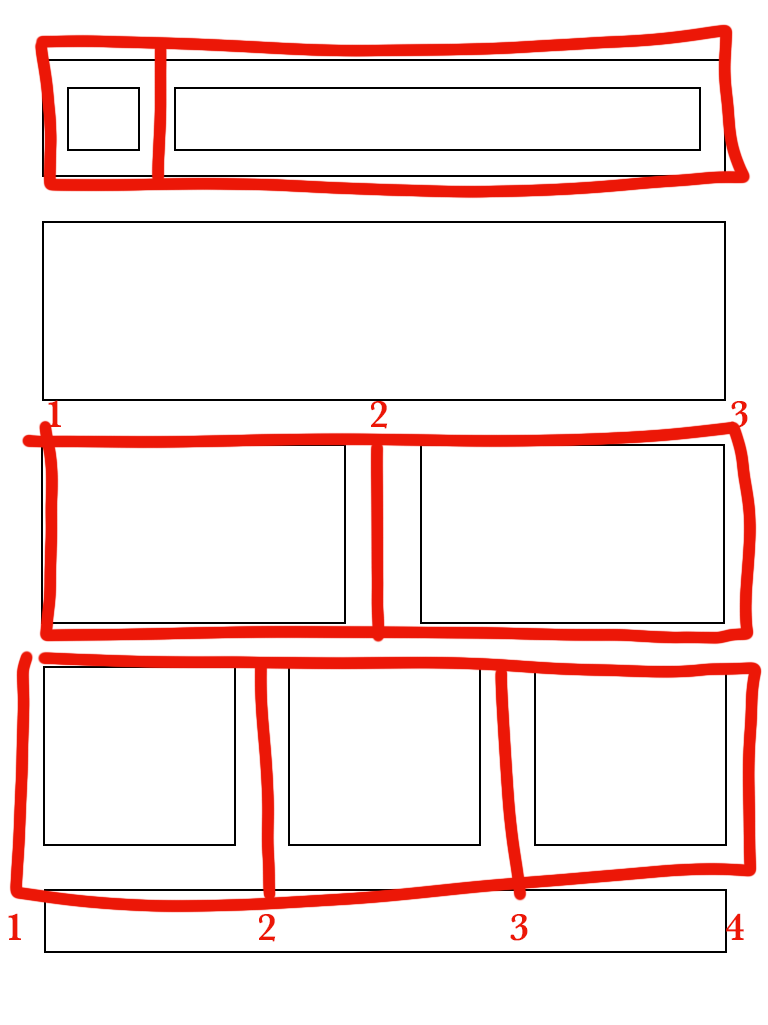
<style>
.page{position:relative;width:768px;height:1025px;background:#ffffff}
.page>*{position:absolute;margin:0}
.t1{font:39.9px "Baskerville-SemiBold";color:#ec1707}
</style>
<div class="page">
<p class="t1" style="left:48px;top:400px;width:700px;height:29px">1         2          3</p>
<p class="t1" style="left:8px;top:913px;width:736px;height:29px">1       2       3      4</p>
</div>
